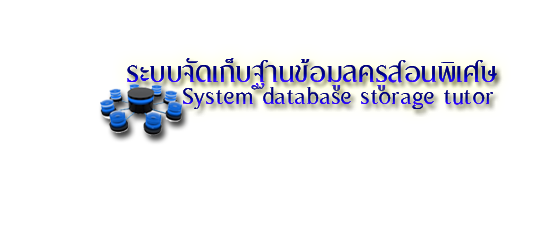
<style>
.page{position:relative;width:550px;height:230px;background:#ffffff}
.page>*{position:absolute;margin:0}
.t1{font:41.7px "PGVIM"}
.t2{font:34.7px "PGVIM"}
</style>
<div class="page">
<p class="t1" style="left:127px;top:58px;width:370px;height:33px">ระบบจัดเก็บฐานข้อมูลครูสอนพิเศษ</p>
<p class="t1" style="left:127px;top:58px;width:370px;height:33px">ระบบจัดเก็บฐานข้อมูลครูสอนพิเศษ</p>
<p class="t2" style="left:183px;top:87px;width:310px;height:22px">System database storage tutor</p>
<p class="t2" style="left:183px;top:87px;width:310px;height:22px">System database storage tutor</p>
</div>
